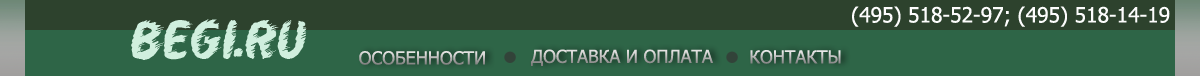
<style>
.page{position:relative;width:1200px;height:76px;background:#2e6547}
.page>*{position:absolute;margin:0}
.t1{font:21px "Tahoma";color:#ffffff}
.t2{font:46.9px "WhirlCyrillic";letter-spacing:-0.025em;color:#d0efde;font-style:italic}
.t3{font:18px "Tahoma"}
.t4{font:18px "Tahoma";text-transform:uppercase}
</style>
<div class="page">
<p class="t1" style="left:852px;top:6px;width:318px;height:21px">(495) 518-52-97; (495) 518-14-19</p>
<p class="t2" style="left:131px;top:19px;width:176px;height:41px">BEGI.RU</p>
<p class="t3" style="left:359px;top:51px;width:126px;height:14px">ОСОБЕННОСТИ</p>
<p class="t4" style="left:531px;top:49px;width:182px;height:17px">доставка и оплата</p>
<p class="t4" style="left:750px;top:50px;width:91px;height:14px">контакты</p>
</div>
